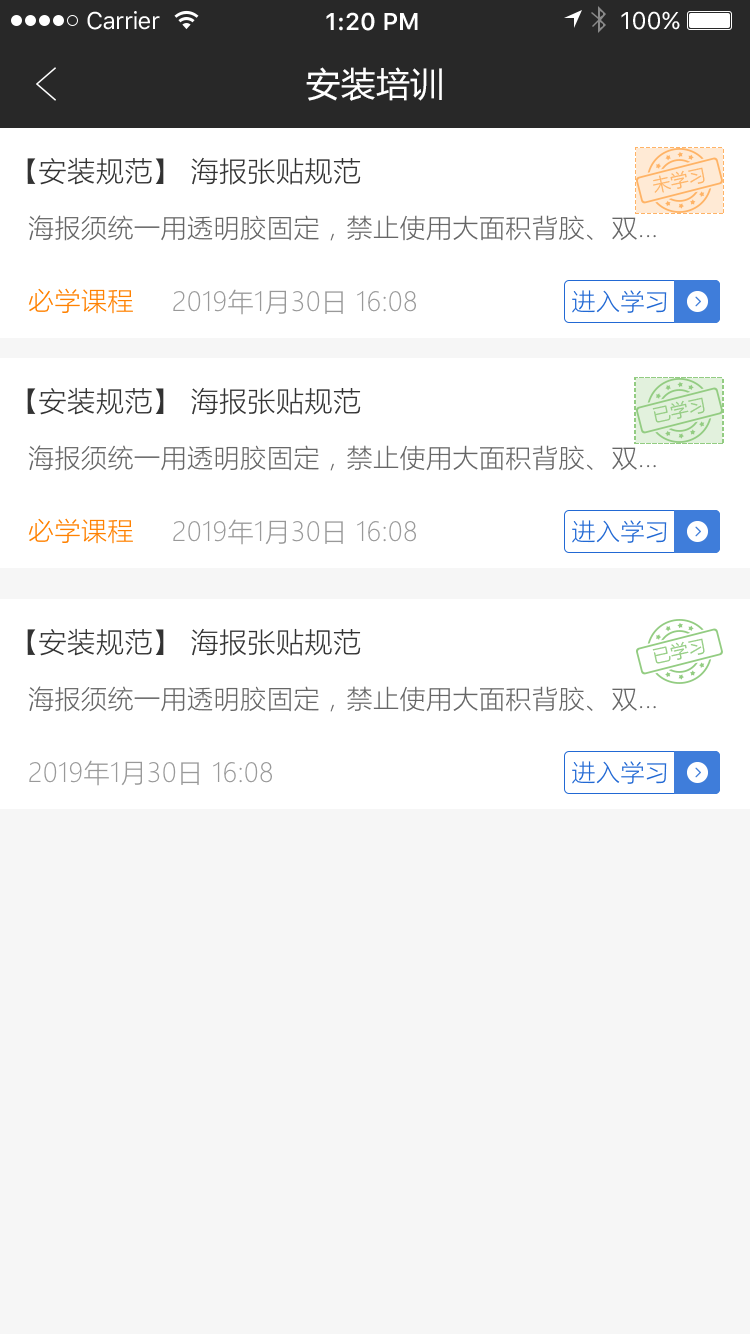
<style>
.page{position:relative;width:750px;height:1334px;background:#f6f6f6}
.page>*{position:absolute;margin:0}
.t1{font:24px "SFUIText-Regular";letter-spacing:-0.025em;color:#ffffff}
.t2{font:24px "SFUIText-Semibold";color:#ffffff}
.t3{font:24px "SFUIText-Regular";color:#ffffff}
.t4{font:34px "MicrosoftYaHei";letter-spacing:0.02em;color:#ffffff}
.t5{font:28px "MicrosoftYaHeiLight";letter-spacing:0.02em;color:#333333}
.t6{font:17.8px "MicrosoftYaHeiLight";letter-spacing:0.02em;color:#ffb366}
.t7{font:26px "MicrosoftYaHeiLight";letter-spacing:0.02em;color:#666666}
.t8{font:26px "MicrosoftYaHeiLight";letter-spacing:0.02em;color:#ff8100}
.t9{font:26px "MicrosoftYaHeiLight";letter-spacing:0.02em;color:#999999}
.t10{font:24px "MicrosoftYaHeiLight";letter-spacing:0.02em;color:#2269d4}
.t11{font:17.8px "MicrosoftYaHeiLight";letter-spacing:0.02em;color:#93cc82}
</style>
<div class="page">
<p class="t1" style="left:87px;top:11px;width:73px;height:19px">Carrier</p>
<p class="t2" style="left:326px;top:12px;width:92px;height:19px">1:20 PM</p>
<p class="t3" style="left:621px;top:11px;width:59px;height:19px">100%</p>
<p class="t4" style="left:306px;top:67px;width:136px;height:34px">安装培训</p>
<p class="t5" style="left:27px;top:157px;width:334px;height:28px">【安装规范】 海报张贴规范</p>
<p class="t6" style="left:653px;top:167px;width:52px;height:26px;rotate:-12deg">未学习</p>
<p class="t7" style="left:28px;top:215px;width:628px;height:26px">海报须统一用透明胶固定，禁止使用大面积背胶、双...</p>
<p class="t8" style="left:28px;top:288px;width:105px;height:26px">必学课程</p>
<p class="t9" style="left:173px;top:289px;width:243px;height:26px">2019年1月30日 16:08</p>
<p class="t10" style="left:572px;top:290px;width:95px;height:23px">进入学习</p>
<p class="t5" style="left:27px;top:387px;width:334px;height:28px">【安装规范】 海报张贴规范</p>
<p class="t11" style="left:652px;top:397px;width:53px;height:26px;rotate:-12deg">已学习</p>
<p class="t7" style="left:28px;top:445px;width:628px;height:26px">海报须统一用透明胶固定，禁止使用大面积背胶、双...</p>
<p class="t8" style="left:28px;top:518px;width:105px;height:26px">必学课程</p>
<p class="t9" style="left:173px;top:519px;width:243px;height:26px">2019年1月30日 16:08</p>
<p class="t10" style="left:572px;top:520px;width:95px;height:23px">进入学习</p>
<p class="t5" style="left:27px;top:628px;width:334px;height:28px">【安装规范】 海报张贴规范</p>
<p class="t11" style="left:652px;top:638px;width:53px;height:26px;rotate:-12deg">已学习</p>
<p class="t7" style="left:28px;top:686px;width:628px;height:26px">海报须统一用透明胶固定，禁止使用大面积背胶、双...</p>
<p class="t9" style="left:29px;top:760px;width:243px;height:26px">2019年1月30日 16:08</p>
<p class="t10" style="left:572px;top:761px;width:95px;height:23px">进入学习</p>
</div>
